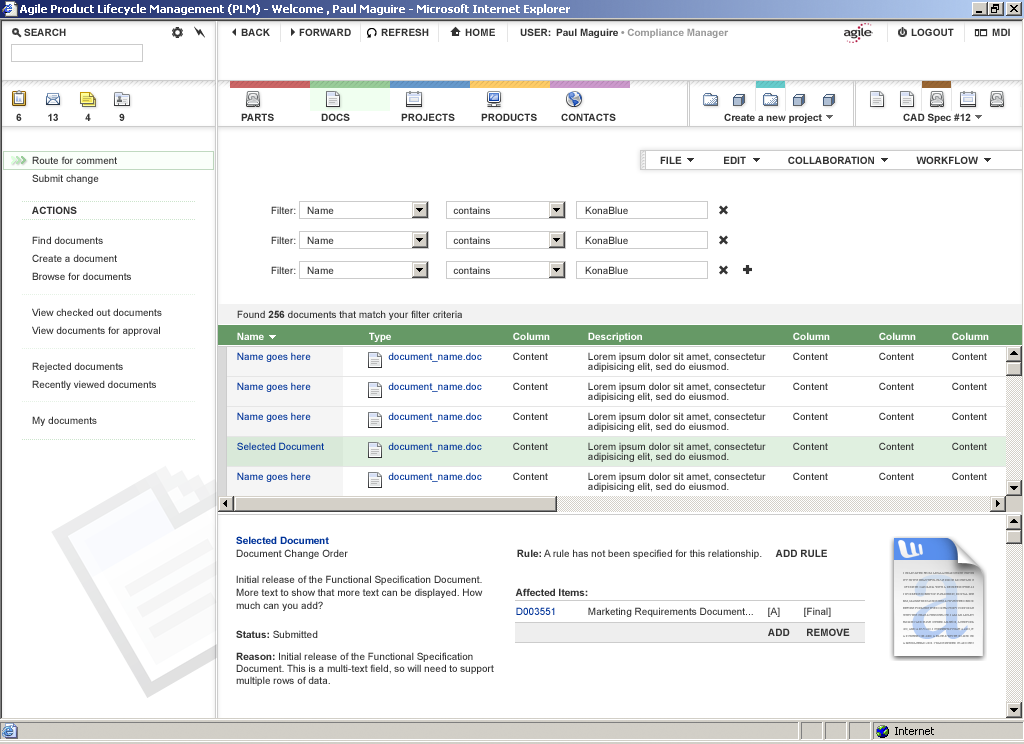
<style>
.page{position:relative;width:1024px;height:744px;background:#ffffff}
.page>*{position:absolute;margin:0}
.t1{font:10px "Arial-BoldMT";color:#333333}
.t2{font:10px "Arial-BoldMT";color:#999999}
.t3{font:10px/18px "ArialMT";color:#333333}
.t4{font:10px "ArialMT";color:#333333}
.t5{font:10px/10px "ArialMT";color:#003399}
.t6{font:10px "Arial-BoldMT";color:#ffffff}
.t7{font:10px/8px "Arial-BoldMT";color:#ffffff}
.t8{font:10px/10px "ArialMT";color:#333333}
.t9{font:10px/13px "ArialMT";color:#333333}
.t10{font:10px/12px "Arial-BoldMT";color:#003399}
.t11{font:10px "ArialMT";color:#003399}
.t12{font:10px/12px "ArialMT";color:#333333}
.t13{font:10px/12px "Arial-BoldMT";color:#333333}
</style>
<div class="page">
<p class="t1" style="left:24px;top:28px;width:42px;height:8px">SEARCH</p>
<p class="t1" style="left:241px;top:28px;width:29px;height:8px">BACK</p>
<p class="t1" style="left:299px;top:28px;width:52px;height:8px">FORWARD</p>
<p class="t1" style="left:381px;top:28px;width:48px;height:8px">REFRESH</p>
<p class="t1" style="left:465px;top:28px;width:30px;height:8px">HOME</p>
<p class="t2" style="left:520px;top:28px;width:209px;height:10px"><span class="t1">USER: Paul Maguire </span>• Compliance Manager</p>
<p class="t1" style="left:911px;top:28px;width:43px;height:8px">LOGOUT</p>
<p class="t1" style="left:992px;top:28px;width:18px;height:8px">MDI</p>
<p class="t1" style="left:16px;top:113px;width:6px;height:8px">6</p>
<p class="t1" style="left:48px;top:113px;width:10px;height:8px">13</p>
<p class="t1" style="left:85px;top:113px;width:6px;height:8px">4</p>
<p class="t1" style="left:119px;top:113px;width:6px;height:8px">9</p>
<p class="t1" style="left:241px;top:113px;width:33px;height:8px">PARTS</p>
<p class="t1" style="left:321px;top:113px;width:29px;height:8px">DOCS</p>
<p class="t1" style="left:401px;top:113px;width:54px;height:8px">PROJECTS</p>
<p class="t1" style="left:481px;top:113px;width:56px;height:8px">PRODUCTS</p>
<p class="t1" style="left:561px;top:113px;width:55px;height:8px">CONTACTS</p>
<p class="t1" style="left:724px;top:113px;width:98px;height:10px">Create a new project</p>
<p class="t1" style="left:903px;top:113px;width:68px;height:10px">CAD Spec #12</p>
<p class="t3" style="left:32px;top:156px;width:85px;height:28px">Route for comment<br>Submit change</p>
<p class="t1" style="left:660px;top:156px;width:318px;height:8px">FILE               EDIT               COLLABORATION               WORKFLOW</p>
<p class="t1" style="left:32px;top:206px;width:45px;height:8px">ACTIONS</p>
<p class="t3" style="left:32px;top:236px;width:130px;height:190px">Find documents<br>Create a document<br>Browse for documents<br><br>View checked out documents<br>View documents for approval<br><br>Rejected documents<br>Recently viewed documents<br><br>My documents</p>
<p class="t4" style="left:237px;top:310px;width:225px;height:10px">Found <span class="t1">256 </span>documents that match your filter criteria</p>
<p class="t5" style="left:237px;top:332px;width:87px;height:150px"><span class="t6">N</span><span class="t7">ame<br><br></span>Name goes here<br><br><br>Name goes here<br><br><br>Name goes here<br><br><br>Selected Document<br><br><br>Name goes here</p>
<p class="t5" style="left:369px;top:332px;width:113px;height:150px"><span class="t6">Type<br><br></span>       document_name.doc<br><br><br>       document_name.doc<br><br><br>       document_name.doc<br><br><br>       document_name.doc<br><br> <br>       document_name.doc</p>
<p class="t8" style="left:513px;top:332px;width:37px;height:148px"><span class="t6">Column<br></span><br>Content<br><br><br>Content<br><br><br>Content<br><br><br>Content<br><br><br>Content</p>
<p class="t8" style="left:588px;top:332px;width:178px;height:160px"><span class="t6">De</span><span class="t7">scription<br></span><br>Lorem ipsum dolor sit amet, consectetur <br>adipisicing elit, sed do eiusmod.<br><br>Lorem ipsum dolor sit amet, consectetur <br>adipisicing elit, sed do eiusmod.<br><br>Lorem ipsum dolor sit amet, consectetur <br>adipisicing elit, sed do eiusmod.<br><br>Lorem ipsum dolor sit amet, consectetur <br>adipisicing elit, sed do eiusmod.<br><br>Lorem ipsum dolor sit amet, consectetur <br>adipisicing elit, sed do eiusmod.</p>
<p class="t8" style="left:793px;top:332px;width:37px;height:148px"><span class="t6">Column<br></span><br>Content<br><br><br>Content<br><br><br>Content<br><br><br>Content<br><br><br>Content</p>
<p class="t8" style="left:879px;top:332px;width:37px;height:148px"><span class="t6">Column<br><br></span>Content<br><br><br>Content<br><br><br>Content<br><br><br>Content<br><br><br>Content</p>
<p class="t8" style="left:952px;top:332px;width:37px;height:148px"><span class="t6">Column<br></span><br>Content<br><br><br>Content<br><br><br>Content<br><br><br>Content<br><br><br>Content</p>
<p class="t9" style="left:236px;top:536px;width:247px;height:75px"><span class="t10">Selected Document<br></span>Document Change Order<br><br>Initial release of the Functional Specification Document.<br>More text to show that more text can be displayed. How<br>much can you add?</p>
<p class="t4" style="left:517px;top:549px;width:310px;height:10px"><span class="t1">Rule:</span> A rule has not been specified for this relationship.     <span class="t1">ADD RULE</span></p>
<p class="t1" style="left:515px;top:588px;width:73px;height:8px">Affected Items:</p>
<p class="t4" style="left:516px;top:607px;width:315px;height:10px"><span class="t11">D003551 </span>Marketing Requirements Document... [A] [Final]</p>
<p class="t12" style="left:236px;top:630px;width:258px;height:56px"><span class="t13">Status:</span> Submitted<br><span class="t13">Reason:</span> Initial release of the Functional Specification<br>Document. This is a multi-text field, so will need to support<br>multiple rows of data.</p>
<p class="t1" style="left:768px;top:628px;width:82px;height:8px">ADD      REMOVE</p>
</div>
